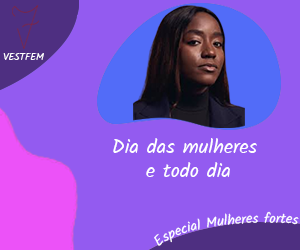
<style>
.page{position:relative;width:300px;height:250px;background:#935bf0}
.page>*{position:absolute;margin:0}
.t1{font:10px "Kalam-Regular";color:#ffffff}
.t2{font:20px "Kalam-Regular";color:#ffffff}
.t3{font:14px "Kalam-Regular";color:#ffffff}
.t4{font:9px "Kalam-Regular";color:#ffffff}
</style>
<div class="page">
<p class="t1" style="left:3px;top:53px;width:41px;height:7px">VESTFEM</p>
<p class="t2" style="left:113px;top:138px;width:144px;height:39px;text-align:center">Dia das mulheres <br>e todo dia</p>
<p class="t3" style="left:154px;top:211px;width:145px;height:35px;text-align:center"><span class="t4">                                       </span>Especial Mulheres fortes</p>
</div>
